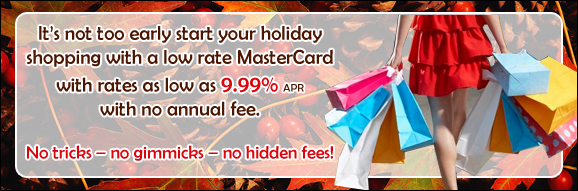
<style>
.page{position:relative;width:578px;height:191px}
.page>*{position:absolute;margin:0}
.t1{font:20px "BerlinSansFB-Reg";color:#4c1601}
.t2{font:23px "BerlinSansFB-Reg";color:#db050b}
.t3{font:11px "BerlinSansFB-Reg";color:#4c1601}
.t4{font:18px "BerlinSansFB-Reg";color:#db050b}
</style>
<div class="page">
<p class="t1" style="left:27px;top:25px;width:306px;height:136px;text-align:center">It’s not too early start your holiday <br>shopping with a low rate MasterCard with rates as low as <span class="t2">9.99% </span><span class="t3">APR</span> <br>with no annual fee.  <br><br><span class="t4">No tricks – no gimmicks – no hidden fees!</span></p>
</div>
